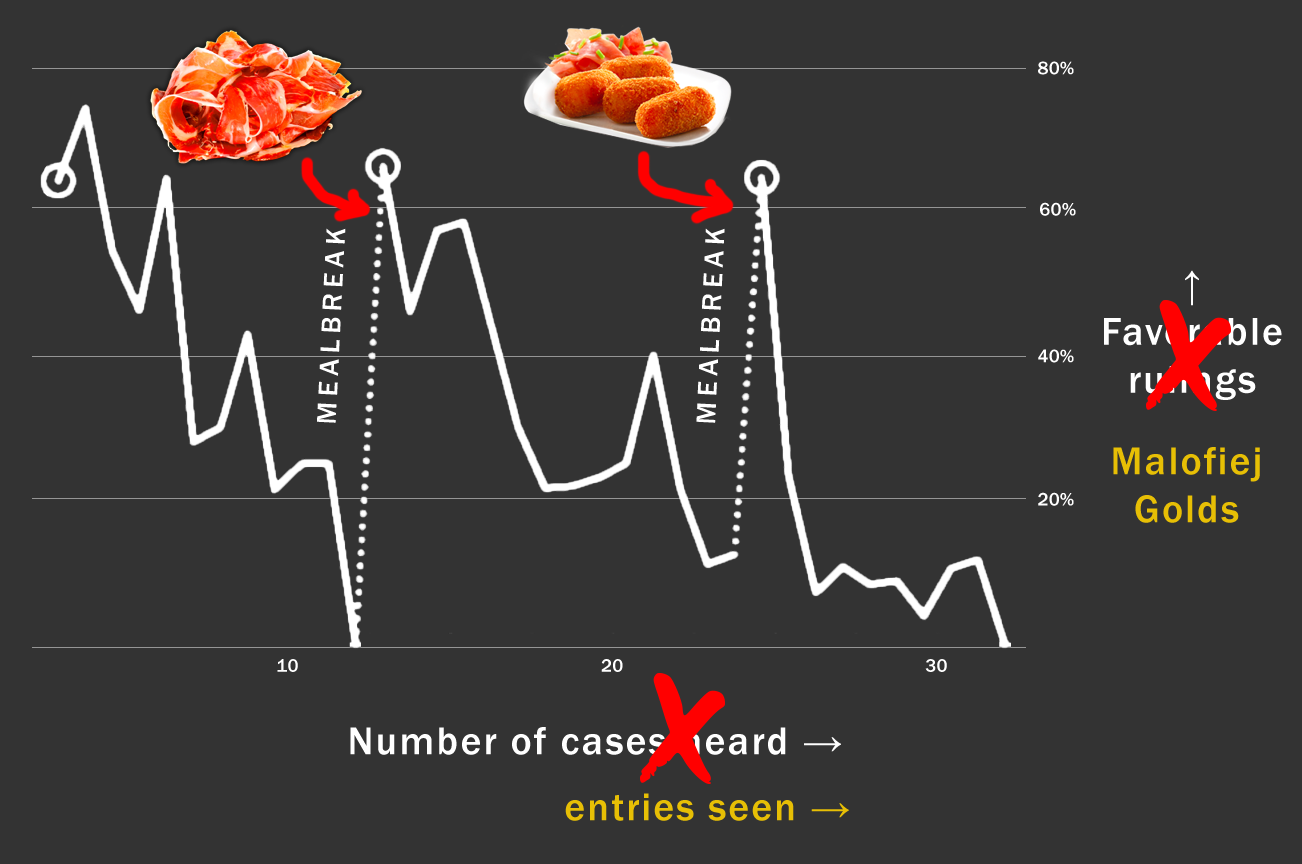
<style>
.page{position:relative;width:1302px;height:864px;background:#333333}
.page>*{position:absolute;margin:0}
.t1{font:18.7px "FranklinGothic-Medium";color:#ffffff}
.t2{font:28px "FranklinGothic-Medium";letter-spacing:0.2em;color:#ffffff}
.t3{font:40px "FranklinGothic-Medium";letter-spacing:0.05em;color:#ffffff}
.t4{font:40px "FranklinGothic-Medium";letter-spacing:0.05em;color:#e7bf05}
</style>
<div class="page">
<p class="t1" style="left:1038px;top:61px;width:36px;height:14px">80%</p>
<p class="t1" style="left:1040px;top:202px;width:36px;height:14px">60%</p>
<p class="t2" style="left:317px;top:228px;width:29px;height:195px;rotate:-87deg">MEALBREAK</p>
<p class="t2" style="left:696px;top:228px;width:29px;height:195px;rotate:-87deg">MEALBREAK</p>
<p class="t3" style="left:1104px;top:270px;width:178px;height:130px;text-align:center">↑<br>Favorable <br>rulings</p>
<p class="t1" style="left:1038px;top:349px;width:36px;height:14px">40%</p>
<p class="t4" style="left:1113px;top:447px;width:147px;height:76px;text-align:center">Malofiej Golds</p>
<p class="t1" style="left:1038px;top:492px;width:36px;height:14px">20%</p>
<p class="t1" style="left:277px;top:659px;width:21px;height:13px">10</p>
<p class="t1" style="left:601px;top:659px;width:22px;height:13px">20</p>
<p class="t1" style="left:925px;top:659px;width:22px;height:13px">30</p>
<p class="t3" style="left:350px;top:727px;width:491px;height:28px">Number of cases heard →</p>
<p class="t4" style="left:565px;top:793px;width:284px;height:28px">entries seen →</p>
</div>
